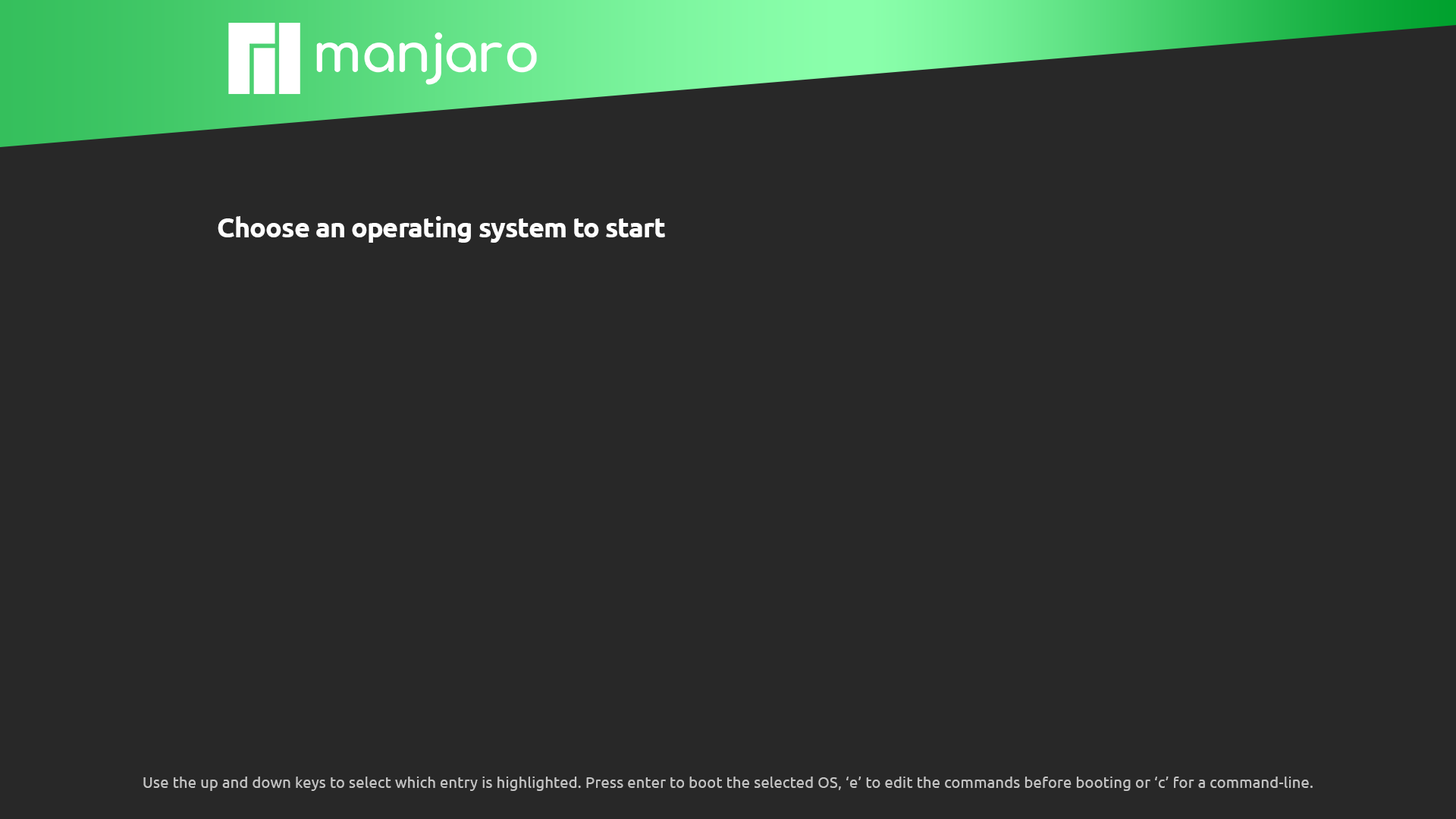
<style>
.page{position:relative;width:1456px;height:819px;background:#282828}
.page>*{position:absolute;margin:0}
.t1{font:27.3px "Ubuntu-Bold";letter-spacing:-0.025em;color:#ffffff}
.t2{font:15.2px "Ubuntu-Regular";letter-spacing:0.015em;color:#c4c4c4}
</style>
<div class="page">
<p class="t1" style="left:218px;top:216px;width:447px;height:27px">Choose an operating system to start</p>
<p class="t2" style="left:143px;top:777px;width:1170px;height:14px">Use the up and down keys to select which entry is highlighted. Press enter to boot the selected OS, ‘e’ to edit the commands before booting or ‘c’ for a command-line.</p>
</div>
